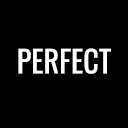
<style>
.page{position:relative;width:128px;height:128px;background:#000000}
.page>*{position:absolute;margin:0}
.t1{font:30.2px "Oswald-Regular";color:#ffffff;text-transform:uppercase}
</style>
<div class="page">
<p class="t1" style="left:18px;top:48px;width:93px;height:26px">Perfect</p>
</div>
